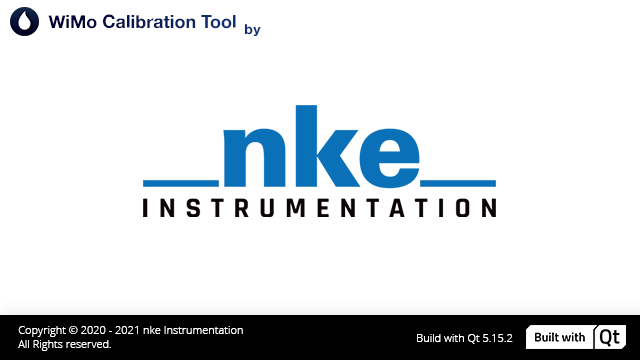
<style>
.page{position:relative;width:640px;height:360px;background:#ffffff}
.page>*{position:absolute;margin:0}
.t1{font:17.6px "AlteHaasGrotesk_Bold"}
.t2{font:13.7px "AlteHaasGrotesk_Bold";letter-spacing:0.04em;color:#113071}
.t3{font:11px "OpenSans-Light";color:#fefefe}
.t4{font:11px "OpenSans-Light";color:#ffffff}
</style>
<div class="page">
<p class="t1" style="left:48px;top:14px;width:188px;height:15px">WiMo Calibration Tool</p>
<p class="t2" style="left:244px;top:24px;width:17px;height:12px">by</p>
<p class="t3" style="left:18px;top:326px;width:225px;height:25px">Copyright © 2020 - 2021 nke Instrumentation<br>All Rights reserved.</p>
<p class="t4" style="left:417px;top:334px;width:96px;height:10px">Build with Qt 5.15.2</p>
</div>
